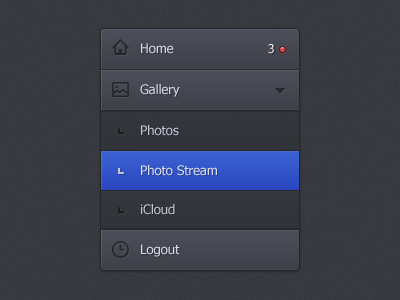
<style>
.page{position:relative;width:400px;height:300px;background:#393b41}
.page>*{position:absolute;margin:0}
.t1{font:13px "Tahoma";color:#d9ddea}
.t2{font:12px "Tahoma";color:#f6f7fa}
.t3{font:13px "Tahoma";color:#c5c8d8}
.t4{font:13px "Tahoma";color:#e1e4ef}
</style>
<div class="page">
<p class="t1" style="left:141px;top:43px;width:33px;height:11px">Home</p>
<p class="t2" style="left:268px;top:44px;width:6px;height:10px">3</p>
<p class="t1" style="left:140px;top:84px;width:40px;height:13px">Gallery</p>
<p class="t3" style="left:141px;top:125px;width:38px;height:11px">Photos</p>
<p class="t4" style="left:141px;top:165px;width:76px;height:11px">Photo Stream</p>
<p class="t3" style="left:141px;top:204px;width:34px;height:11px">iCloud</p>
<p class="t1" style="left:141px;top:244px;width:39px;height:13px">Logout</p>
</div>
